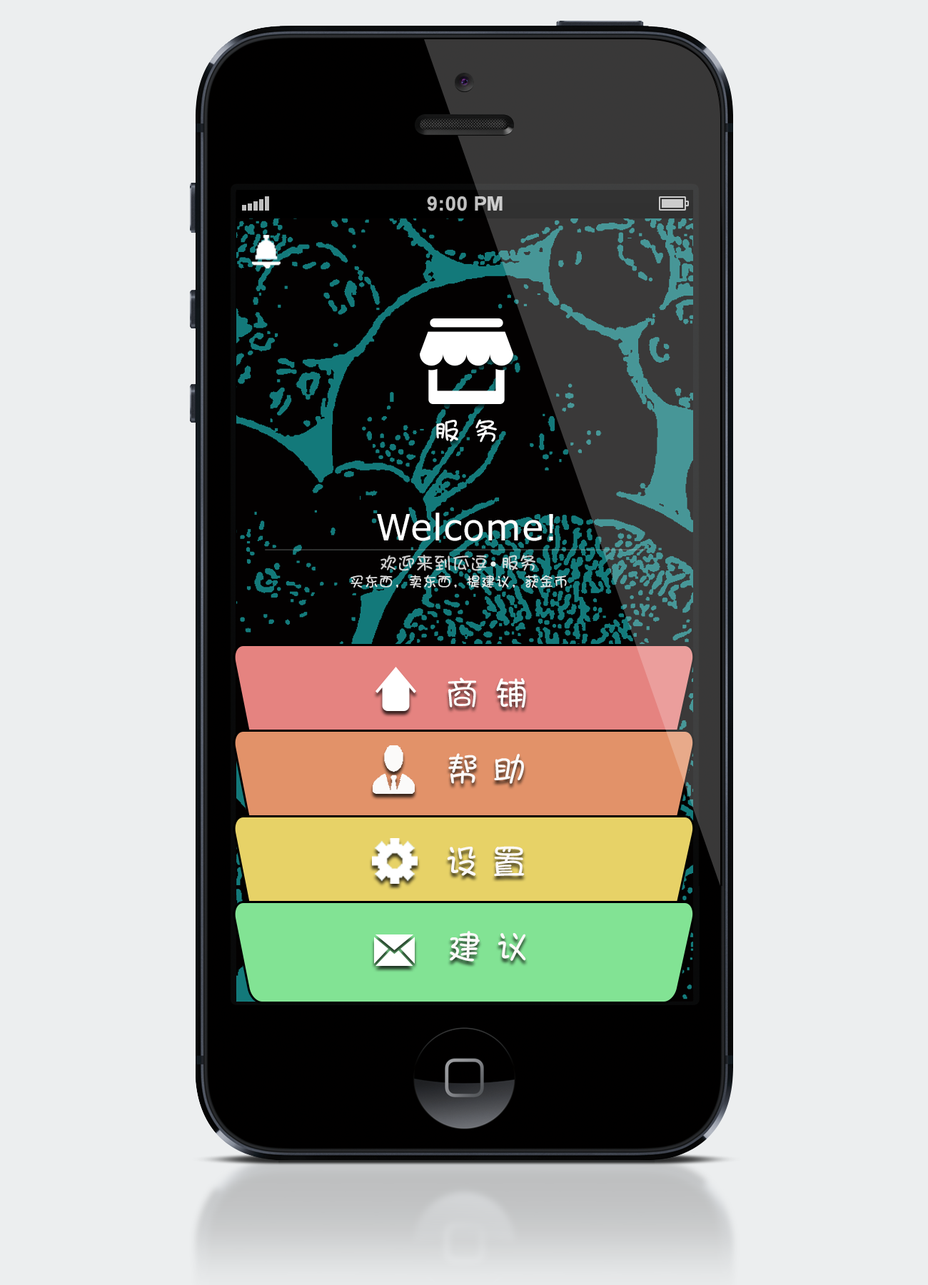
<style>
.page{position:relative;width:928px;height:1285px;background:#eceeef}
.page>*{position:absolute;margin:0}
.t1{font:25.7px "DFPShaoNvW5";letter-spacing:0.1em;color:#ffffff}
.t2{font:36.4px "Verdana";letter-spacing:0.015em;color:#ffffff}
.t3{font:17.8px "DFPShaoNvW5";letter-spacing:0.02em;color:#cccbcb}
.t4{font:14.3px "DFPShaoNvW5";letter-spacing:0.02em;color:#dfdfdf}
.t5{font:34.3px "DFPShaoNvW5";letter-spacing:0.05em;color:#ffffff}
.t6{font:34.3px "DFPShaoNvW5";letter-spacing:0.02em;color:#fbf9f8}
</style>
<div class="page">
<p class="t1" style="left:436px;top:419px;width:61px;height:24px">服 务</p>
<p class="t2" style="left:377px;top:513px;width:176px;height:28px">Welcome!</p>
<p class="t3" style="left:380px;top:555px;width:155px;height:16px">欢迎来到瓜逗  服务</p>
<p class="t4" style="left:351px;top:575px;width:216px;height:13px">买东西，卖东西，提建议，获金币</p>
<p class="t5" style="left:448px;top:677px;width:78px;height:31px">商 铺</p>
<p class="t6" style="left:448px;top:753px;width:76px;height:31px">帮 助</p>
<p class="t6" style="left:447px;top:846px;width:78px;height:31px">设 置</p>
<p class="t6" style="left:450px;top:931px;width:76px;height:31px">建 议</p>
</div>
